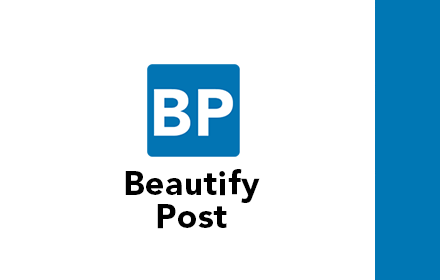
<style>
.page{position:relative;width:440px;height:280px;background:#ffffff}
.page>*{position:absolute;margin:0}
.t1{font:33.6px/33.5px "Avenir-Black";letter-spacing:0.02em;color:#000000}
</style>
<div class="page">
<p class="t1" style="left:125px;top:169px;width:135px;height:60px;text-align:center">Beautify<br>Post</p>
</div>
